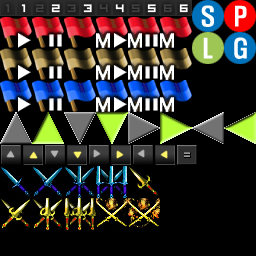
<style>
.page{position:relative;width:256px;height:256px;background:#000000}
.page>*{position:absolute;margin:0}
.t1{font:12px "imagine-font";color:#414141}
.t2{font:12px "imagine-font";color:#ffffff}
</style>
<div class="page">
<p class="t1" style="left:5px;top:4px;width:5px;height:9px">1</p>
<p class="t2" style="left:21px;top:4px;width:5px;height:9px">1</p>
<p class="t1" style="left:35px;top:4px;width:9px;height:9px">2</p>
<p class="t2" style="left:51px;top:4px;width:9px;height:9px">2</p>
<p class="t1" style="left:67px;top:4px;width:9px;height:9px">3</p>
<p class="t2" style="left:83px;top:4px;width:9px;height:9px">3</p>
<p class="t1" style="left:99px;top:4px;width:9px;height:9px">4</p>
<p class="t2" style="left:115px;top:4px;width:9px;height:9px">4</p>
<p class="t1" style="left:131px;top:4px;width:9px;height:9px">5</p>
<p class="t2" style="left:147px;top:4px;width:9px;height:9px">5</p>
<p class="t1" style="left:163px;top:4px;width:9px;height:9px">6</p>
<p class="t2" style="left:179px;top:4px;width:9px;height:9px">6</p>
</div>
